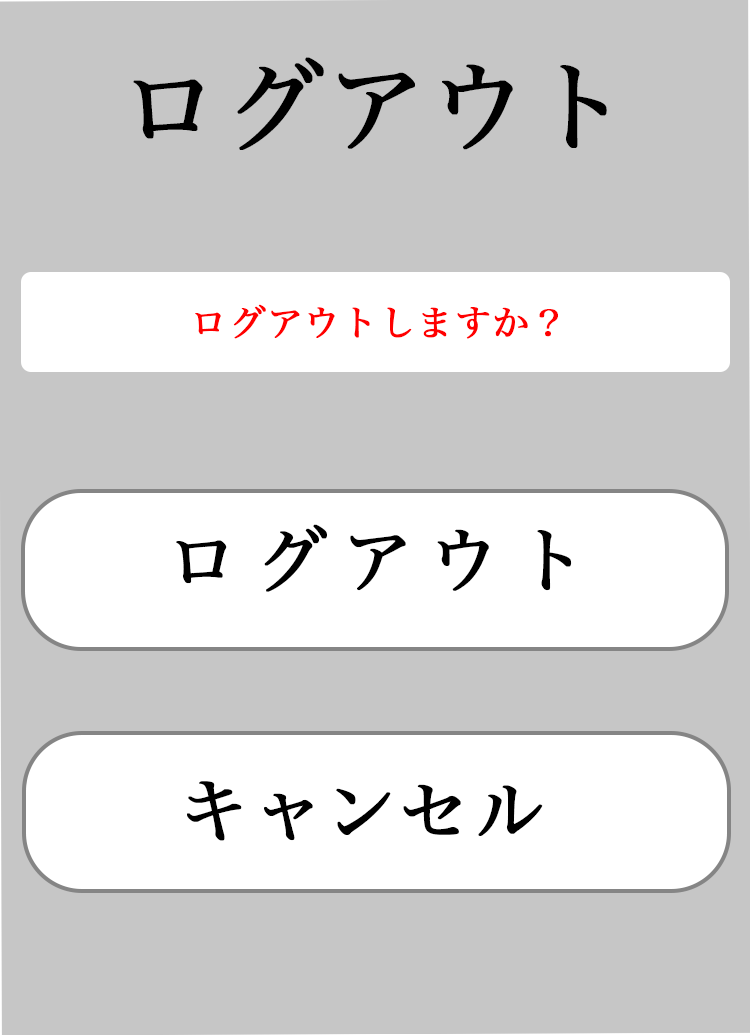
<style>
.page{position:relative;width:750px;height:1035px;background:#c6c6c6}
.page>*{position:absolute;margin:0}
.t1{font:100px "HiraMinPro-W3";color:#000000;font-weight:bold}
.t2{font:36px "HiraMinPro-W3";color:#ff0000;font-weight:bold}
.t3{font:72px "HiraMinPro-W3";color:#000000;font-weight:bold}
</style>
<div class="page">
<p class="t1" style="left:133px;top:57px;width:474px;height:93px">ログアウト</p>
<p class="t2" style="left:195px;top:304px;width:363px;height:35px">ログアウトしますか？</p>
<p class="t3" style="left:176px;top:524px;width:396px;height:68px">ログアウト</p>
<p class="t3" style="left:187px;top:781px;width:356px;height:60px">キャンセル</p>
</div>
